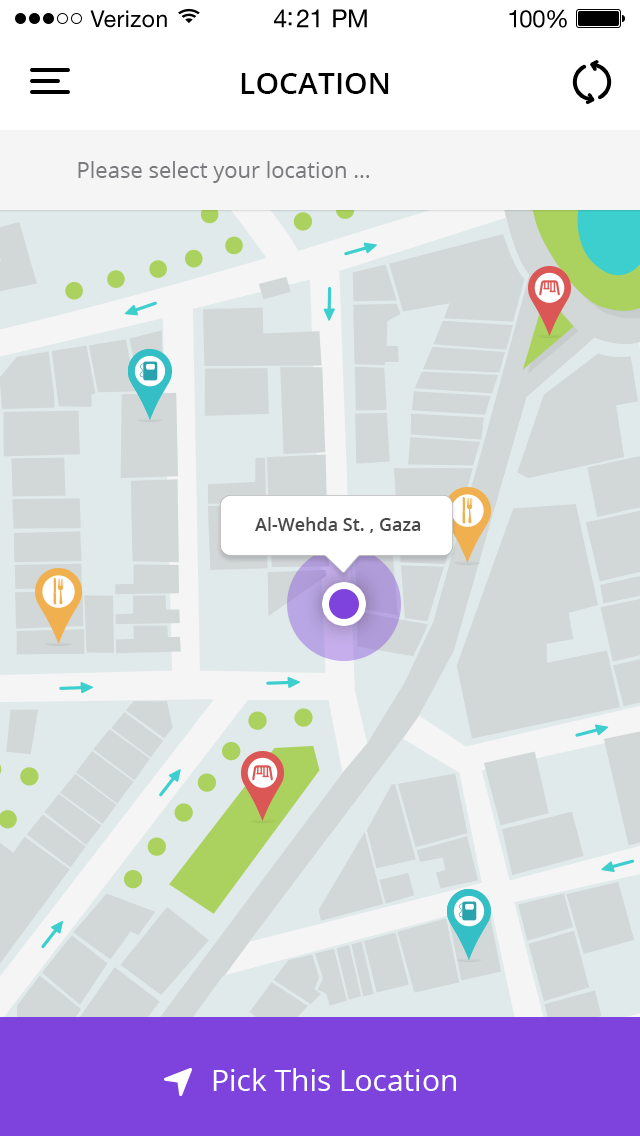
<style>
.page{position:relative;width:640px;height:1136px;background:#d2d7d7}
.page>*{position:absolute;margin:0}
.t1{font:23px "HelveticaNeueLTStd-Roman";letter-spacing:0.02em;color:#010000}
.t2{font:25px "HelveticaNeueLTStd-Roman";letter-spacing:-0.02em;color:#010000}
.t3{font:24px "HelveticaNeueLTStd-Roman";letter-spacing:-0.02em;color:#010000}
.t4{font:30px "OpenSans-Semibold";color:#010000}
.t5{font:22px "OpenSans";color:#7a7a7f}
.t6{font:18px "OpenSans-Semibold";color:#494949}
.t7{font:30px "OpenSans";color:#ffffff}
</style>
<div class="page">
<p class="t1" style="left:90px;top:10px;width:77px;height:18px">Verizon</p>
<p class="t2" style="left:274px;top:9px;width:93px;height:19px">4:21 PM</p>
<p class="t3" style="left:509px;top:9px;width:58px;height:19px">100%</p>
<p class="t4" style="left:241px;top:73px;width:148px;height:21px">LOCATION</p>
<p class="t5" style="left:78px;top:161px;width:292px;height:22px">Please select your location ...</p>
<p class="t6" style="left:255px;top:517px;width:166px;height:16px">Al-Wehda St. , Gaza</p>
<p class="t7" style="left:213px;top:1068px;width:243px;height:23px">Pick This Location</p>
</div>
